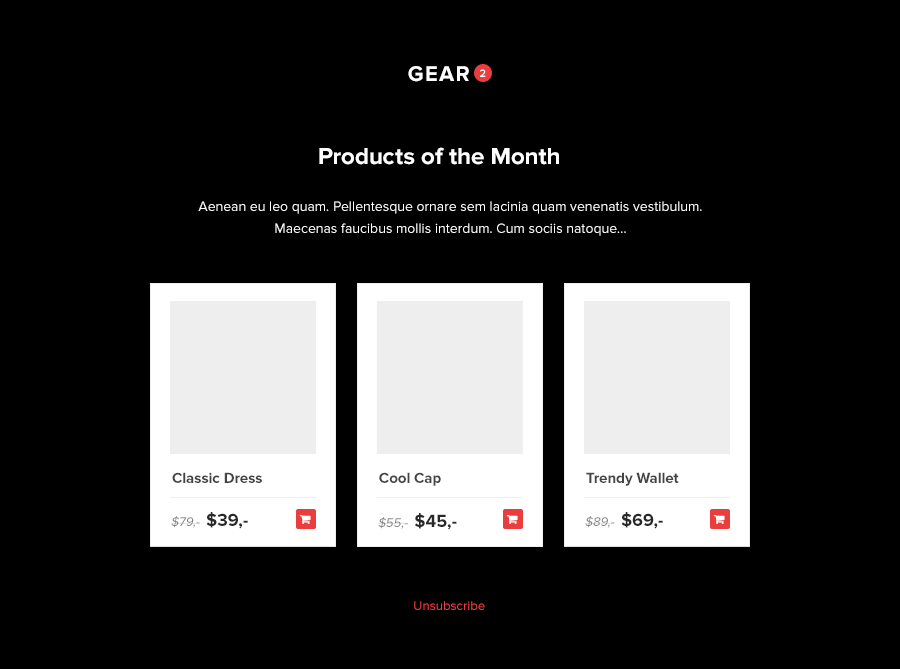
<style>
.page{position:relative;width:900px;height:669px;background:#000000}
.page>*{position:absolute;margin:0}
.t1{font:22px "ProximaNova-Bold";letter-spacing:0.06em;color:#ffffff;text-transform:uppercase}
.t2{font:11px "ProximaNova-Semibold";color:#fffefe}
.t3{font:24px "ProximaNova-Bold";color:#ffffff}
.t4{font:13.9px/21.9px "ProximaNova-Regular";color:#ffffff}
.t5{font:15px "ProximaNova-Bold";color:#444444}
.t6{font:13px "ProximaNova-Regular";color:#828282;font-style:italic}
.t7{font:18px "ProximaNova-Bold";color:#282828}
.t8{font:13.1px "ProximaNova-Regular";color:#ea3d3d}
</style>
<div class="page">
<p class="t1" style="left:408px;top:66px;width:61px;height:16px">Gear</p>
<p class="t2" style="left:480px;top:69px;width:6px;height:8px">2</p>
<p class="t3" style="left:319px;top:147px;width:240px;height:18px">Products of the Month</p>
<p class="t4" style="left:198px;top:201px;width:504px;height:35px;text-align:center">Aenean eu leo quam. Pellentesque ornare sem lacinia quam venenatis vestibulum. <br>Maecenas faucibus mollis interdum. Cum sociis natoque...</p>
<p class="t5" style="left:172px;top:472px;width:90px;height:11px">Classic Dress</p>
<p class="t5" style="left:379px;top:472px;width:62px;height:14px">Cool Cap</p>
<p class="t5" style="left:586px;top:472px;width:93px;height:14px">Trendy Wallet</p>
<p class="t6" style="left:170px;top:512px;width:78px;height:17px">$79,-  <span class="t7">$39,-</span></p>
<p class="t6" style="left:377px;top:513px;width:80px;height:17px">$55,-  <span class="t7">$45,-</span></p>
<p class="t6" style="left:584px;top:512px;width:79px;height:17px">$89,-  <span class="t7">$69,-</span></p>
<p class="t8" style="left:414px;top:601px;width:71px;height:9px">Unsubscribe</p>
</div>
